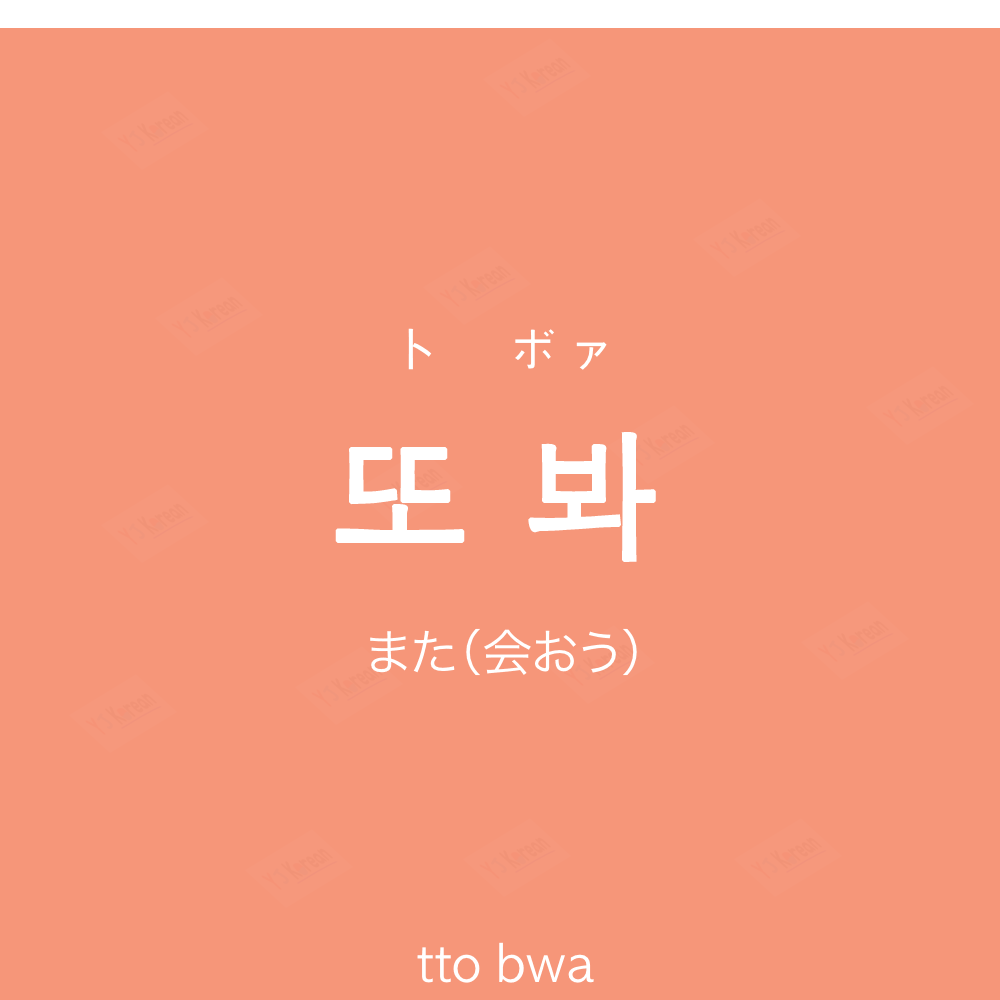
<style>
.page{position:relative;width:1000px;height:1000px;background:#f69679}
.page>*{position:absolute;margin:0}
.t1{font:60px "AppleGothic";color:#ffffff}
.t2{font:140px "AppleGothic";color:#ffffff;font-weight:bold}
.t3{font:50px "HiraKakuProN-W3";color:#ffffff}
.t4{font:50px "AppleGothic";color:#ffffff}
</style>
<div class="page">
<p class="t1" style="left:408px;top:328px;width:199px;height:42px">ト　ボァ</p>
<p class="t2" style="left:335px;top:432px;width:321px;height:130px">또 봐</p>
<p class="t3" style="left:370px;top:628px;width:267px;height:48px">また（会おう）</p>
<p class="t4" style="left:417px;top:942px;width:177px;height:41px">tto bwa</p>
</div>
